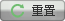
<style>
.page{position:relative;width:65px;height:21px}
.page>*{position:absolute;margin:0}
.t1{font:12.4px "MicrosoftYaHei";letter-spacing:0.2em;color:#333333;scale:0.86 1}
</style>
<div class="page">
<p class="t1" style="left:32px;top:5px;width:23px;height:11px">重置</p>
</div>
